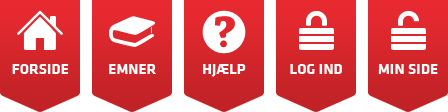
<style>
.page{position:relative;width:448px;height:112px;background:#ffffff}
.page>*{position:absolute;margin:0}
.t1{font:14.6px "KlavikaBold-Bold";letter-spacing:0.025em;color:#ffffff}
</style>
<div class="page">
<p class="t1" style="left:12px;top:64px;width:57px;height:10px">FORSIDE</p>
<p class="t1" style="left:12px;top:64px;width:57px;height:10px">FORSIDE</p>
<p class="t1" style="left:12px;top:64px;width:57px;height:10px">FORSIDE</p>
<p class="t1" style="left:109px;top:64px;width:47px;height:10px">EMNER</p>
<p class="t1" style="left:109px;top:64px;width:47px;height:10px">EMNER</p>
<p class="t1" style="left:109px;top:64px;width:47px;height:10px">EMNER</p>
<p class="t1" style="left:203px;top:64px;width:43px;height:13px">HJÆLP</p>
<p class="t1" style="left:203px;top:64px;width:43px;height:13px">HJÆLP</p>
<p class="t1" style="left:203px;top:64px;width:43px;height:13px">HJÆLP</p>
<p class="t1" style="left:290px;top:64px;width:52px;height:10px">LOG IND</p>
<p class="t1" style="left:290px;top:64px;width:52px;height:10px">LOG IND</p>
<p class="t1" style="left:290px;top:64px;width:52px;height:10px">LOG IND</p>
<p class="t1" style="left:378px;top:64px;width:60px;height:10px">MIN SIDE</p>
<p class="t1" style="left:378px;top:64px;width:60px;height:10px">MIN SIDE</p>
<p class="t1" style="left:378px;top:64px;width:60px;height:10px">MIN SIDE</p>
</div>
